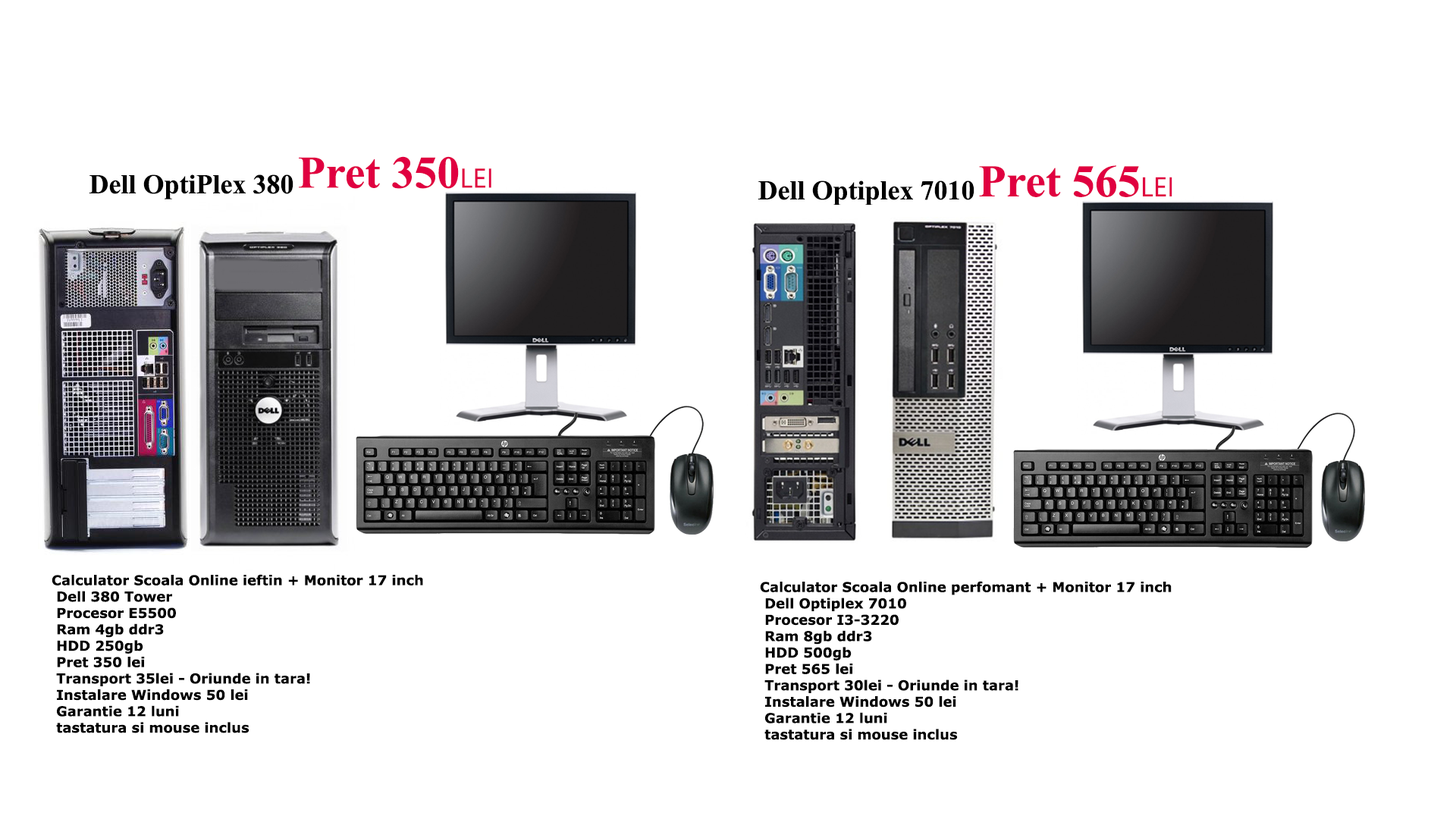
<style>
.page{position:relative;width:1456px;height:819px;background:#ffffff}
.page>*{position:absolute;margin:0}
.t1{font:45.5px "TimesNewRomanPS-BoldMT";color:#e00040}
.t2{font:27.3px "SegoeUISymbol";color:#e00040}
.t3{font:13.6px "Verdana-Bold";color:#000000}
</style>
<div class="page">
<p class="t1" style="left:299px;top:156px;width:192px;height:33px">Pret 350<span class="t2">LEI</span></p>
<p class="t1" style="left:979px;top:165px;width:193px;height:32px">Pret 565<span class="t2">LEI</span></p>
<p class="t3" style="left:52px;top:574px;width:371px;height:159px">Calculator Scoala Online ieftin + Monitor 17 inch <br> Dell 380 Tower <br> Procesor E5500 <br> Ram 4gb ddr3 <br> HDD 250gb<br> Pret 350 lei <br> Transport 35lei - Oriunde in tara!<br> Instalare Windows 50 lei<br> Garantie 12 luni<br> tastatura si mouse inclus</p>
<p class="t3" style="left:760px;top:581px;width:412px;height:159px">Calculator Scoala Online perfomant + Monitor 17 inch <br> Dell Optiplex 7010 <br> Procesor I3-3220<br> Ram 8gb ddr3 <br> HDD 500gb<br> Pret 565 lei <br> Transport 30lei - Oriunde in tara!<br> Instalare Windows 50 lei<br> Garantie 12 luni<br> tastatura si mouse inclus</p>
</div>
